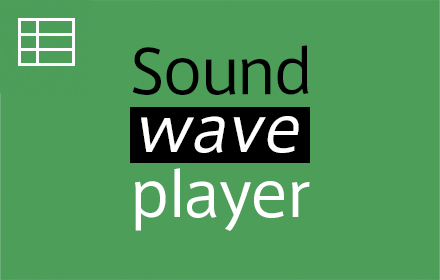
<style>
.page{position:relative;width:440px;height:280px;background:#4c9e59}
.page>*{position:absolute;margin:0}
.t1{font:60px "AxisStd-Regular";color:#000000}
.t2{font:60px "AxisStd-Regular";color:#fefefe;font-style:italic}
.t3{font:60px "AxisStd-Regular";color:#ffffff}
</style>
<div class="page">
<p class="t1" style="left:132px;top:45px;width:177px;height:50px">Sound</p>
<p class="t2" style="left:141px;top:116px;width:158px;height:37px">wave</p>
<p class="t3" style="left:135px;top:168px;width:175px;height:63px">player</p>
</div>
